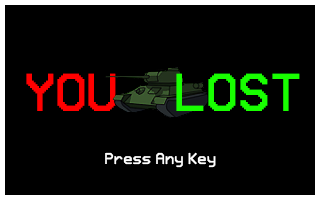
<style>
.page{position:relative;width:320px;height:200px;background:#000000}
.page>*{position:absolute;margin:0}
.t1{font:48px "Retron2000";color:#ff0000}
.t2{font:48px "Retron2000";color:#18ff00}
.t3{font:14px "Retron2000";color:#ffffff}
</style>
<div class="page">
<p class="t1" style="left:26px;top:73px;width:90px;height:38px">YOU</p>
<p class="t2" style="left:176px;top:73px;width:124px;height:38px">LOST</p>
<p class="t3" style="left:105px;top:152px;width:111px;height:16px">Press Any Key</p>
</div>
